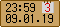
<style>
.page{position:relative;width:60px;height:27px;background:#caa364}
.page>*{position:absolute;margin:0}
.t1{font:11px "XENOA";color:#000000}
.t2{font:11px "XENOA";color:#d40000}
</style>
<div class="page">
<p class="t1" style="left:6px;top:3px;width:29px;height:9px">23:59</p>
<p class="t2" style="left:45px;top:3px;width:5px;height:9px">3</p>
<p class="t1" style="left:6px;top:14px;width:47px;height:9px">09.01.19</p>
</div>
